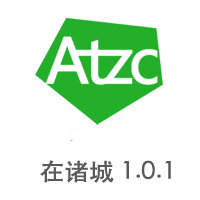
<style>
.page{position:relative;width:200px;height:200px;background:#ffffff}
.page>*{position:absolute;margin:0}
.t1{font:23.8px "STHeitiSC-Medium";color:#595959;scale:1.06 1}
</style>
<div class="page">
<p class="t1" style="left:40px;top:160px;width:131px;height:23px">在诸城 1.0.1</p>
</div>
